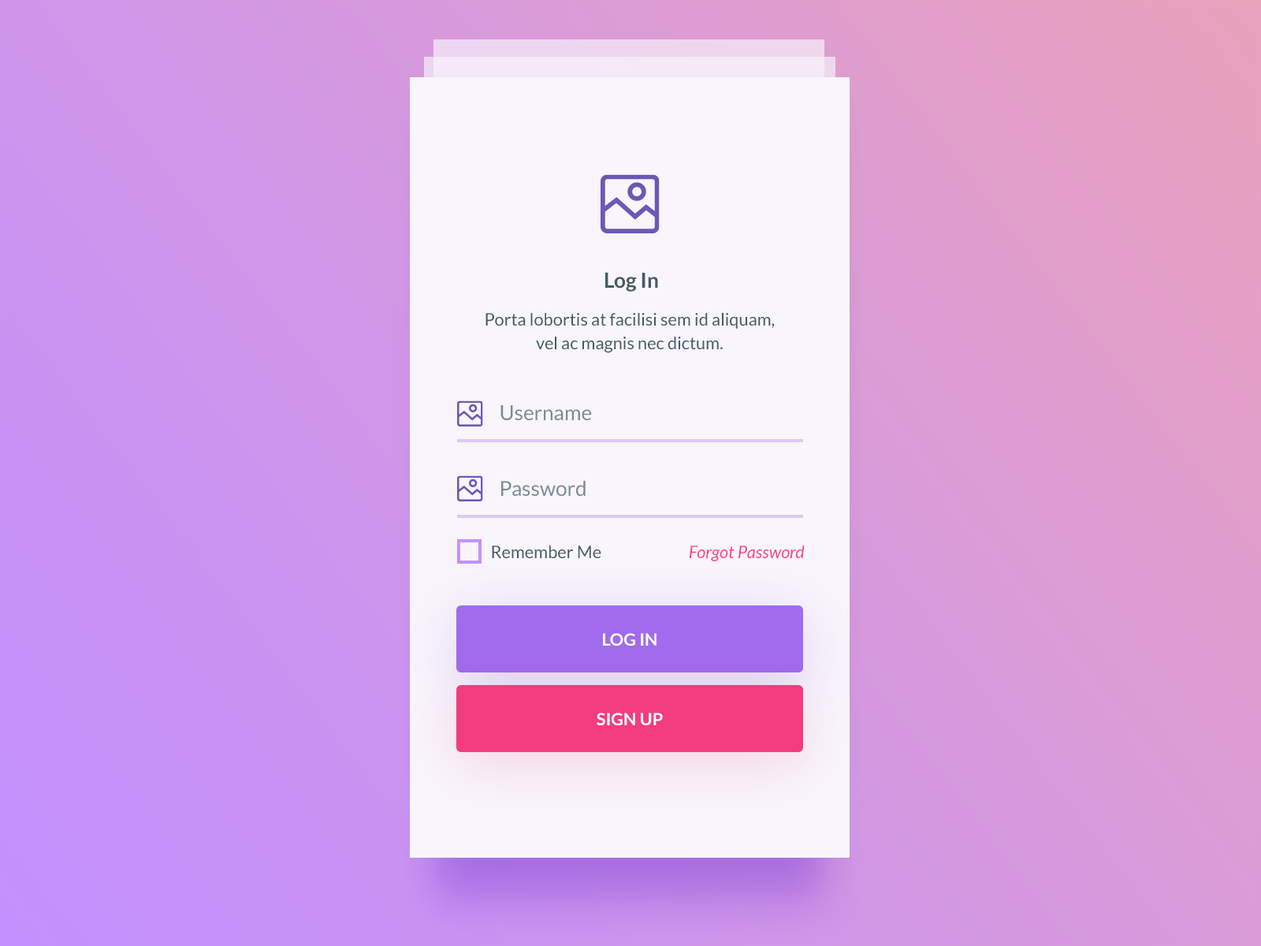
<style>
.page{position:relative;width:1261px;height:946px}
.page>*{position:absolute;margin:0}
.t1{font:20.6px "Lato-Bold";color:#455a64}
.t2{font:17.2px/24px "Lato-Regular";color:#455a64}
.t3{font:20.6px "Lato-Regular";color:#7c8b92}
.t4{font:17.2px "Lato-Regular";color:#455a64}
.t5{font:17.2px "Lato-Italic";color:#ff4081}
.t6{font:17.2px "Lato-Bold";color:#ffffff}
.t7{font:17.2px "Lato-Bold";color:#ffffff;text-transform:uppercase}
</style>
<div class="page">
<p class="t1" style="left:605px;top:272px;width:53px;height:20px">Log In</p>
<p class="t2" style="left:485px;top:313px;width:290px;height:40px;text-align:center">Porta lobortis at facilisi sem id aliquam, vel ac magnis nec dictum.</p>
<p class="t3" style="left:500px;top:405px;width:92px;height:15px">Username</p>
<p class="t3" style="left:501px;top:480px;width:85px;height:16px">Password</p>
<p class="t4" style="left:492px;top:545px;width:109px;height:13px">Remember Me</p>
<p class="t5" style="left:689px;top:545px;width:116px;height:16px">Forgot Password</p>
<p class="t6" style="left:603px;top:633px;width:53px;height:12px">LOG IN</p>
<p class="t7" style="left:597px;top:712px;width:66px;height:13px">sign up</p>
</div>
